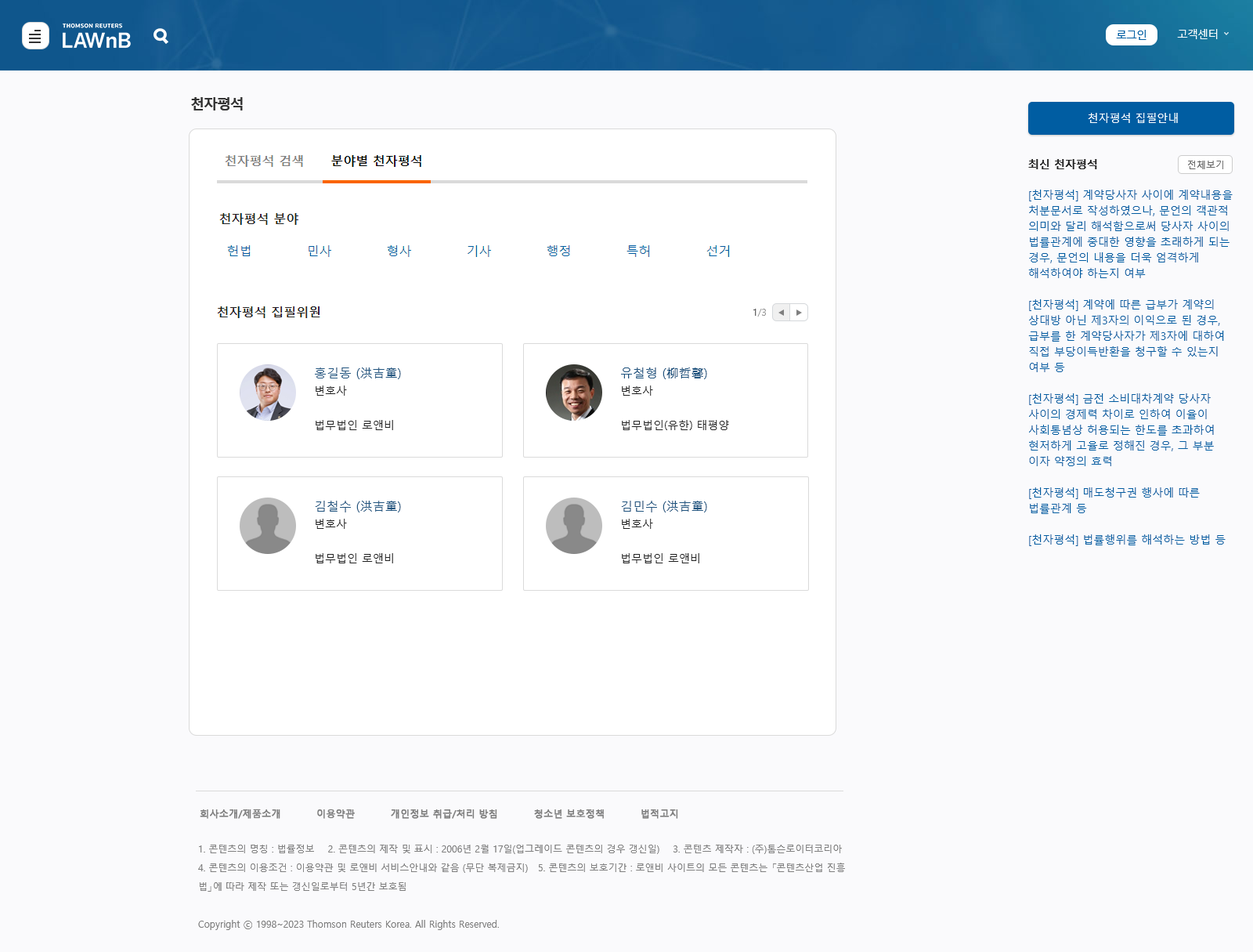
<style>
.page{position:relative;width:1253px;height:952px;background:#fafafc}
.page>*{position:absolute;margin:0}
.t1{font:14.1px "MalgunGothicBold";letter-spacing:-0.06em;color:#333333}
.t2{font:11px "MalgunGothic";color:#ffffff}
.t3{font:11px "MalgunGothicBold";color:#212121}
.t4{font:9.4px "MalgunGothic";color:#666666}
.t5{font:11px/15.7px "MalgunGothic";color:#005da2}
.t6{font:9.4px "MalgunGothic";color:#999999}
.t7{font:9.4px "MalgunGothic";color:#585858}
.t8{font:11px/17.2px "MalgunGothic";color:#212121}
.t9{font:12.5px/17.2px "MalgunGothic";color:#20547f}
.t10{font:9.4px "MalgunGothic";color:#7f7f7f;font-weight:bold}
.t11{font:9.4px/18.8px "MalgunGothic";color:#7f7f7f}
</style>
<div class="page">
<p class="t1" style="left:191px;top:97px;width:52px;height:13px">천자평석</p>
<p class="t2" style="left:1088px;top:113px;width:90px;height:10px">천자평석 집필안내</p>
<p class="t3" style="left:1028px;top:159px;width:69px;height:10px">최신 천자평석</p>
<p class="t4" style="left:1188px;top:161px;width:35px;height:8px">전체보기</p>
<p class="t5" style="left:1028px;top:190px;width:205px;height:356px">[천자평석] 계약당사자 사이에 계약내용을 처분문서로 작성하였으나, 문언의 객관적 의미와 달리 해석함으로써 당사자 사이의 법률관계에 중대한 영향을 초래하게 되는 경우, 문언의 내용을 더욱 엄격하게 해석하여야 하는지 여부<br><br>[천자평석] 계약에 따른 급부가 계약의 상대방 아닌 제3자의 이익으로 된 경우, 급부를 한 계약당사자가 제3자에 대하여 직접 부당이득반환을 청구할 수 있는지 여부 등<br><br>[천자평석] 금전 소비대차계약 당사자 사이의 경제력 차이로 인하여 이율이 사회통념상 허용되는 한도를 초과하여 현저하게 고율로 정해진 경우, 그 부분 이자 약정의 효력<br><br>[천자평석] 매도청구권 행사에 따른 법률관계 등<br><br>[천자평석] 법률행위를 해석하는 방법 등</p>
<p class="t6" style="left:753px;top:309px;width:13px;height:7px"><span class="t7">1</span>/3</p>
<p class="t8" style="left:315px;top:367px;width:86px;height:63px"><span class="t9">홍길동 (洪吉童) <br></span>변호사<br><br>법무법인 로앤비</p>
<p class="t8" style="left:621px;top:367px;width:108px;height:63px"><span class="t9">유철형 (柳哲馨)<br></span>변호사<br><br>법무법인(유한) 태평양</p>
<p class="t8" style="left:315px;top:500px;width:86px;height:63px"><span class="t9">김철수 (洪吉童) <br></span>변호사<br><br>법무법인 로앤비</p>
<p class="t8" style="left:621px;top:500px;width:86px;height:63px"><span class="t9">김민수 (洪吉童) <br></span>변호사<br><br>법무법인 로앤비</p>
<p class="t10" style="left:200px;top:808px;width:478px;height:10px">회사소개/제품소개          이용약관          개인정보 취급/처리 방침          청소년 보호정책          법적고지</p>
<p class="t11" style="left:198px;top:844px;width:647px;height:86px">1. 콘텐츠의 명칭 : 법률정보    2. 콘텐츠의 제작 및 표시 : 2006년 2월 17일(업그레이드 콘텐츠의 경우 갱신일)    3. 콘텐츠 제작자 : (주)톰슨로이터코리아    <br>4. 콘텐츠의 이용조건 : 이용약관 및 로앤비 서비스안내와 같음 (무단 복제금지)   5. 콘텐츠의 보호기간 : 로앤비 사이트의 모든 콘텐츠는 「콘텐츠산업 진흥<br>법」에 따라 제작 또는 갱신일로부터 5년간 보호됨<br><br>Copyright ⓒ 1998~2023 Thomson Reuters Korea. All Rights Reserved.</p>
</div>
